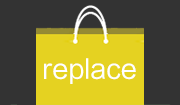
<style>
.page{position:relative;width:180px;height:105px;background:#333333}
.page>*{position:absolute;margin:0}
.t1{font:26.3px "LTHYSZK";color:#ffffff}
</style>
<div class="page">
<p class="t1" style="left:44px;top:58px;width:92px;height:26px">replace</p>
</div>
